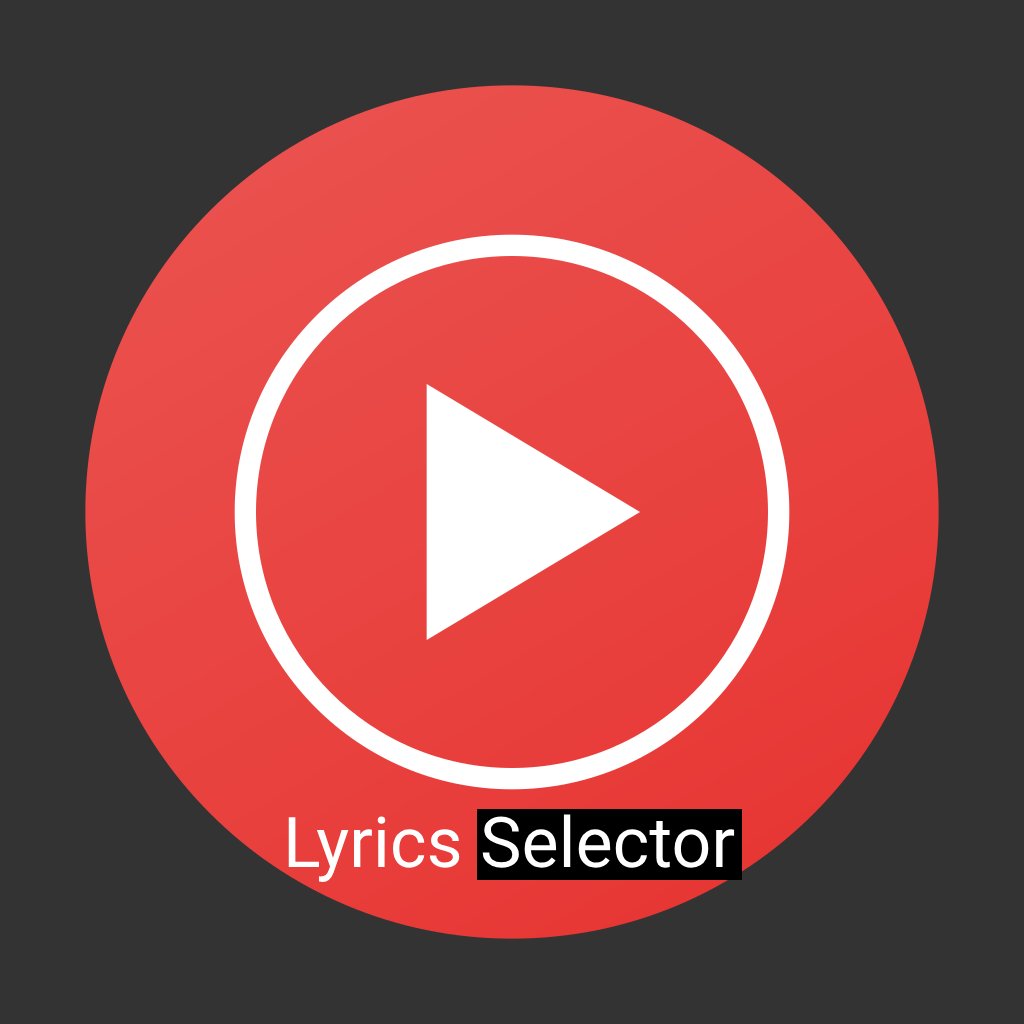
<style>
.page{position:relative;width:1024px;height:1024px;background:#333333}
.page>*{position:absolute;margin:0}
.t1{font:70px "Roboto-Regular";color:#ffffff}
</style>
<div class="page">
<p class="t1" style="left:288px;top:814px;width:447px;height:68px">Lyrics Selector</p>
</div>
